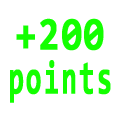
<style>
.page{position:relative;width:120px;height:120px;background:#ffffff}
.page>*{position:absolute;margin:0}
.t1{font:46.6px "Consolas-Bold";letter-spacing:0.05em;color:#13ff00;font-weight:bold;scale:0.8 1}
.t2{font:46.6px "Consolas-Bold";letter-spacing:0.05em;color:#13ff00;font-weight:bold;scale:0.6 1}
</style>
<div class="page">
<p class="t1" style="left:16px;top:18px;width:88px;height:33px">+200</p>
<p class="t2" style="left:10px;top:60px;width:101px;height:43px">points</p>
</div>
